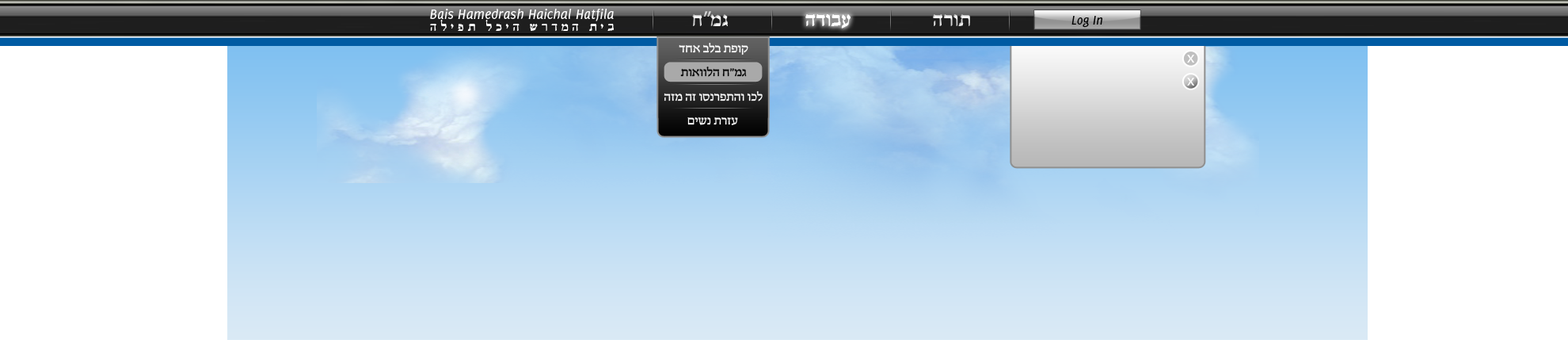
<style>
.page{position:relative;width:1568px;height:340px;background:#ffffff}
.page>*{position:absolute;margin:0}
.t1{font:14.7px "Delicious-Italic";color:#ffffff}
.t2{font:18.6px "Keren-Bold"}
.t3{font:18.6px "Tahoma"}
.t4{font:18.6px "Keren-Bold";color:#ffffff}
.t5{font:13.1px "Delicious-Italic";color:#000000}
.t6{font:11.5px "Keren-Bold";letter-spacing:0.34em;color:#ffffff}
.t7{font:13.5px "HadasaNew";color:#ffffff}
.t8{font:13.5px "HadasaNew";color:#040404}
</style>
<div class="page">
<p class="t1" style="left:430px;top:9px;width:184px;height:12px">Bais Hamedrash Haichal Hatfila</p>
<p class="t2" style="left:692px;top:11px;width:36px;height:15px">ח<span class="t3">”</span>מג</p>
<p class="t4" style="left:805px;top:14px;width:46px;height:15px">הדובע</p>
<p class="t2" style="left:933px;top:14px;width:37px;height:12px">הרות</p>
<p class="t5" style="left:1071px;top:16px;width:31px;height:12px">Log In</p>
<p class="t6" style="left:430px;top:20px;width:184px;height:11px">הליפת לכיה שרדמה תיב</p>
<p class="t7" style="left:679px;top:43px;width:69px;height:12px">דחא בלב תפוק</p>
<p class="t8" style="left:680px;top:67px;width:67px;height:10px">תואוולה ח”מג</p>
<p class="t7" style="left:664px;top:91px;width:99px;height:10px">הזמ הז וסנרפתהו וכל</p>
<p class="t7" style="left:687px;top:116px;width:51px;height:9px">םישנ תרזע</p>
</div>
